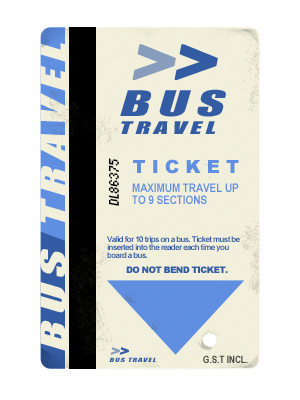
<style>
.page{position:relative;width:300px;height:400px;background:#ffffff}
.page>*{position:absolute;margin:0}
.t1{font:31.5px "Impact";letter-spacing:0.14em;color:#f5f3e1;font-style:italic;scale:1.67 1}
.t2{font:70.6px "Impact";letter-spacing:0.1em;color:#879dbb;font-weight:bold;font-style:italic;scale:1.11 1}
.t3{font:70.6px "Impact";letter-spacing:0.1em;color:#345da7;font-weight:bold;font-style:italic;scale:1.11 1}
.t4{font:16.2px/18px "Impact";letter-spacing:0.15em;color:#345da7;font-style:italic;scale:1.67 1}
.t5{font:32.4px/18px "Impact";letter-spacing:0.15em;color:#345da7;font-style:italic;scale:1.67 1}
.t6{font:11px "Standard0757";color:#000000;font-style:italic}
.t7{font:18px "Arial-Black";letter-spacing:0.35em;color:#6191e6}
.t8{font:12px/12px "ArialNarrow-Bold";color:#6191e6}
.t9{font:8px/8px "Arial-BoldMT";letter-spacing:-0.075em;color:#345da7}
.t10{font:9px "Arial-Black";letter-spacing:-0.07em;color:#345da7}
.t11{font:15.3px "Impact";letter-spacing:0.1em;color:#879dbc;font-weight:bold;font-style:italic;scale:1.11 1}
.t12{font:15.3px "Impact";letter-spacing:0.1em;color:#345da7;font-weight:bold;font-style:italic;scale:1.11 1}
.t13{font:5.2px "Impact";letter-spacing:0.08em;color:#345da7;font-style:italic;scale:1.67 1}
.t14{font:10px "ArialNarrow-Bold";color:#484741}
</style>
<div class="page">
<p class="t1" style="left:40px;top:43px;width:26px;height:308px;rotate:-90deg">BUS TRAVEL</p>
<p class="t2" style="left:132px;top:44px;width:44px;height:36px">&gt;</p>
<p class="t3" style="left:174px;top:44px;width:44px;height:36px">&gt;</p>
<p class="t4" style="left:120px;top:89px;width:106px;height:45px"><span class="t5">BUS<br></span>TRAVEL</p>
<p class="t6" style="left:109px;top:158px;width:10px;height:48px;rotate:-90deg">DL86375</p>
<p class="t7" style="left:133px;top:159px;width:106px;height:15px">TICKET</p>
<p class="t8" style="left:132px;top:183px;width:107px;height:21px">MAXIMUM TRAVEL UP<br>TO 9 SECTIONS</p>
<p class="t9" style="left:107px;top:236px;width:133px;height:22px">Valid for 10 trips on a bus. Ticket must be inserted into the reader each time you board a bus.</p>
<p class="t10" style="left:126px;top:266px;width:102px;height:7px">DO NOT BEND TICKET.</p>
<p class="t11" style="left:110px;top:347px;width:10px;height:8px">&gt;</p>
<p class="t12" style="left:119px;top:347px;width:10px;height:8px">&gt;</p>
<p class="t13" style="left:109px;top:357px;width:47px;height:5px">BUS TRAVEL</p>
<p class="t14" style="left:203px;top:355px;width:45px;height:8px">G.S.T INCL.</p>
</div>
